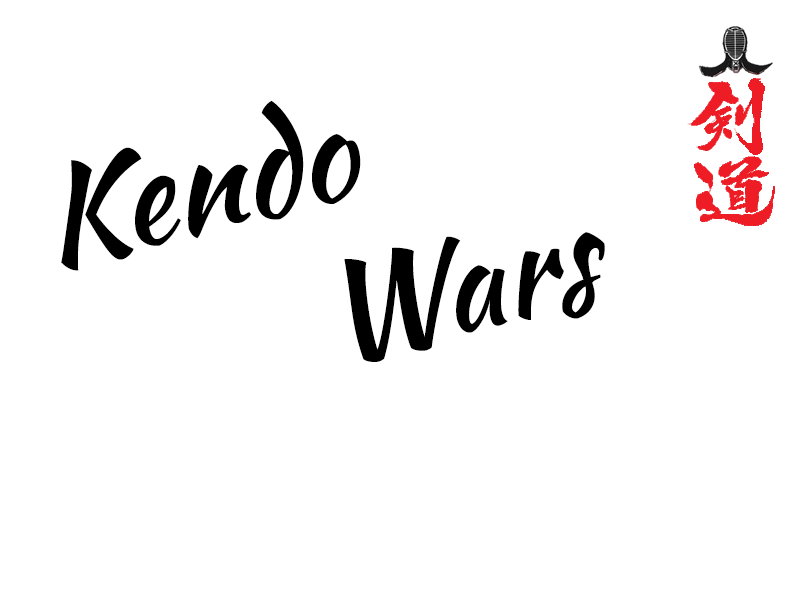
<style>
.page{position:relative;width:800px;height:600px;background:#ffffff}
.page>*{position:absolute;margin:0}
.t1{font:132px "KaushanScript-Regular";color:#000000}
</style>
<div class="page">
<p class="t1" style="left:61px;top:100px;width:544px;height:262px;rotate:-13deg">Kendo<br>        Wars</p>
</div>
